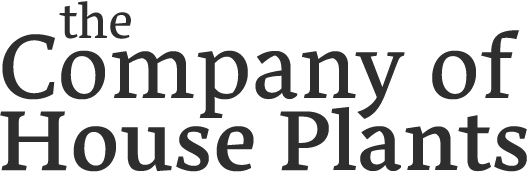
<style>
.page{position:relative;width:527px;height:172px;background:#ffffff}
.page>*{position:absolute;margin:0}
.t1{font:111.1px/72px "NassimLatn-Me";color:#2e2e2e}
.t2{font:81px/96.7px "NassimLatn-Rg";color:#2e2e2e}
.t3{font:65.1px/118.8px "NassimLatn-Rg";color:#2e2e2e}
.t4{font:119.2px/60.7px "NassimLatn-Rg";color:#2e2e2e}
</style>
<div class="page">
<p class="t1" style="left:0px;top:1px;width:527px;height:171px"><span class="t2">    </span><span class="t3">the<br></span><span class="t4">Company of<br></span>House Plants</p>
</div>
